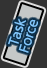
<style>
.page{position:relative;width:47px;height:68px;background:#333333}
.page>*{position:absolute;margin:0}
.t1{font:12px/12px "UDShinGoPro-Light";color:#82c7fd;font-weight:bold}
</style>
<div class="page">
<p class="t1" style="left:8px;top:18px;width:30px;height:35px;text-align:center;rotate:-72deg">Task<br>Force</p>
</div>
